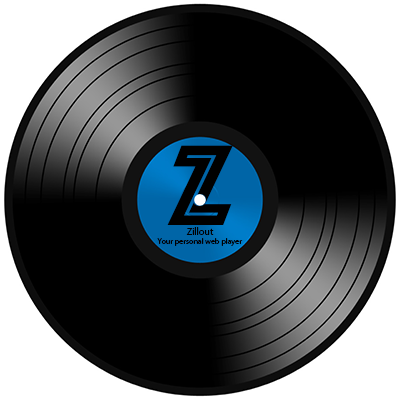
<style>
.page{position:relative;width:400px;height:400px;background:#000000}
.page>*{position:absolute;margin:0}
.t1{font:119.2px "Phosphate-Inline";color:#000000}
.t2{font:8px "MyriadPro-Regular";color:#000000}
.t3{font:10px "MyriadPro-Regular";color:#000000}
</style>
<div class="page">
<p class="t1" style="left:167px;top:145px;width:66px;height:80px">Z</p>
<p class="t2" style="left:157px;top:227px;width:86px;height:19px;text-align:center"><span class="t3">Zillout<br></span>Your personal web player</p>
</div>
